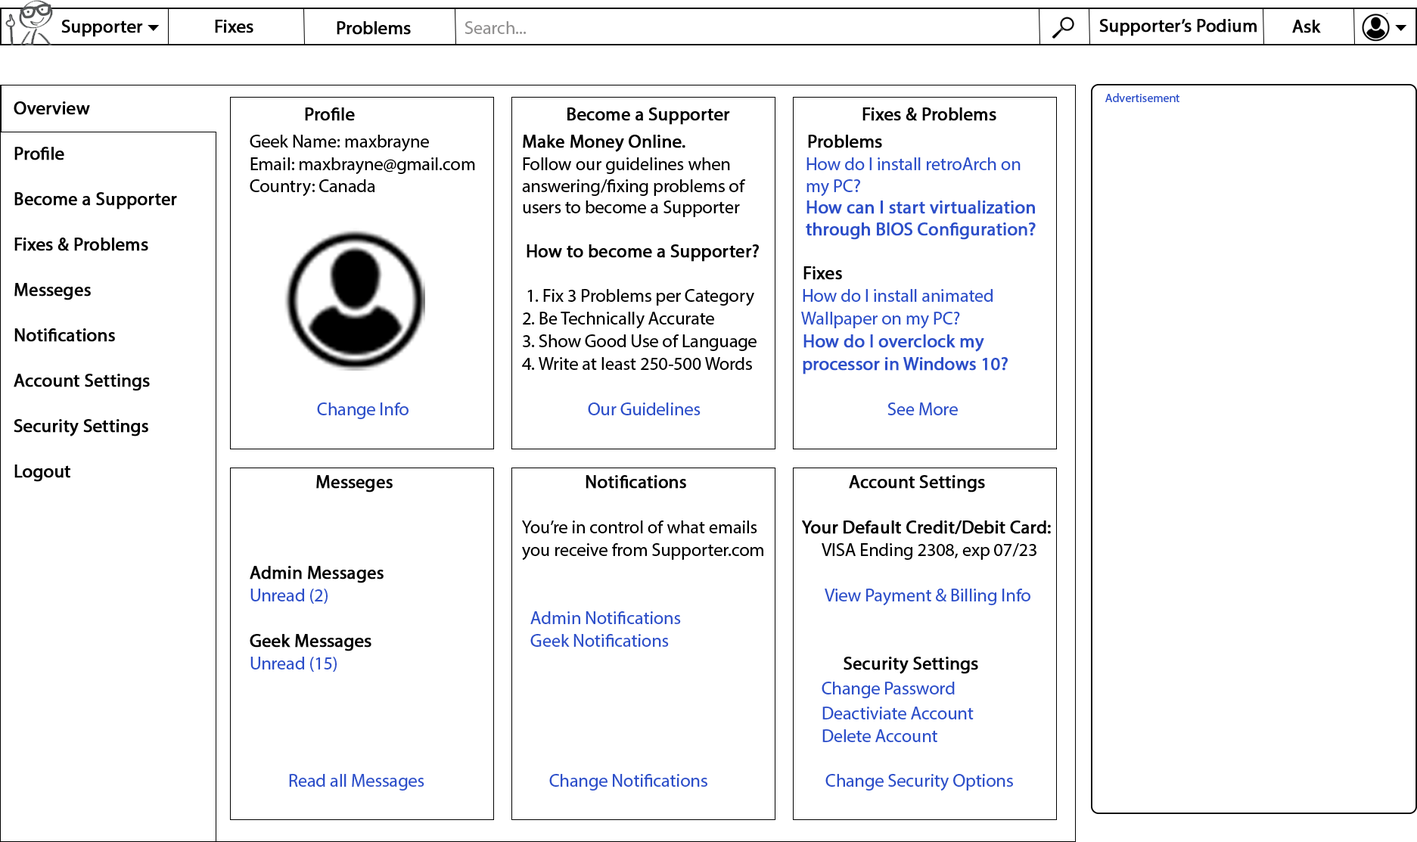
<style>
.page{position:relative;width:1417px;height:842px;background:#ffffff}
.page>*{position:absolute;margin:0}
.t1{font:18.2px "MyriadPro-Regular";color:#000000;font-weight:bold}
.t2{font:18.2px "MyriadPro-Regular";color:#919090}
.t3{font:18.2px "MyriadPro-Regular";color:#010000;font-weight:bold}
.t4{font:18.2px/45.4px "MyriadPro-Regular";color:#000000;font-weight:bold}
.t5{font:12.1px "MyriadPro-Regular";color:#2d4fc9}
.t6{font:18.2px/22.7px "MyriadPro-Regular";color:#2d4fc9}
.t7{font:18.2px/27.2px "MyriadPro-Regular";color:#000000;font-weight:bold}
.t8{font:18.2px/22.7px "MyriadPro-Regular";color:#000000;font-weight:bold}
.t9{font:18.2px/27.2px "MyriadPro-Regular";color:#000000}
.t10{font:18.2px/22.7px "MyriadPro-Regular";color:#000000}
.t11{font:18.2px "MyriadPro-Regular";color:#000000}
.t12{font:18.2px "MyriadPro-Regular";color:#2d4fc9}
.t13{font:18.2px "MyriadPro-Regular";color:#010000}
.t14{font:18.2px "MyriadPro-Regular";color:#2d4fc9;font-weight:bold}
.t15{font:18.2px/22.7px "MyriadPro-Regular";color:#2d4fc9;font-weight:bold}
</style>
<div class="page">
<p class="t1" style="left:61px;top:20px;width:82px;height:17px">Supporter</p>
<p class="t1" style="left:215px;top:20px;width:38px;height:13px">Fixes</p>
<p class="t1" style="left:337px;top:21px;width:74px;height:14px">Problems</p>
<p class="t2" style="left:464px;top:21px;width:62px;height:13px">Search...</p>
<p class="t3" style="left:1099px;top:19px;width:157px;height:17px">Supporter’s Podium</p>
<p class="t1" style="left:1292px;top:20px;width:29px;height:13px">Ask</p>
<p class="t4" style="left:14px;top:101px;width:163px;height:381px">Overview<br>Profile<br>Become a Supporter<br>Fixes &amp; Problems<br>Messeges<br>Notifications<br>Account Settings<br>Security Settings<br>Logout</p>
<p class="t5" style="left:1105px;top:93px;width:74px;height:9px">Advertisement</p>
<p class="t6" style="left:250px;top:107px;width:801px;height:683px"><span class="t7">  Profile       </span><span class="t8">     Become a Supporter    </span><span class="t7">    Fixes &amp; Problems    <br></span><span class="t9">Geek Name: maxbrayne    </span><span class="t1">Make Money Online.        </span><span class="t7">Problems           <br></span><span class="t10">Email: maxbrayne@gma</span><span class="t11">il.com  Follow our guidelines when      </span><span class="t12">How do I install retroArch on    <br></span><span class="t11">Country: Canada      </span><span class="t13">answering/fixing problems of     </span><span class="t12">my PC?           <br>          </span><span class="t11">users to become a Supporter     </span><span class="t14">How can I start virtualization      <br>                         through BIOS Configuration?<br>           </span><span class="t1">How to become a Supporter?             <br>                        Fixes <br>           </span><span class="t10">1. Fix 3 Problems per Category    </span>How do I install animated      <br>          <span class="t10">2. Be Technically Accurate      </span>Wallpaper on my PC?       <br>          <span class="t10">3. Show Good Use of Language</span><span class="t15">    How do I overclock my      <br>          </span><span class="t10">4. Write at least 250-500 Words    </span><span class="t15">processor in Windows 10?     <br>                      <br>     </span>Change Info          Our Guidelines          See More   <br><br><br>     <span class="t7">Messeges             Notifications      Account Settings<br></span><span class="t10"><br>          You’re in control of what emails    </span><span class="t8">Your Default Credit/Debit Card:                      <br>          </span><span class="t10">you receive from Supporter.com         VISA Ending 2308, exp 07/23<br></span><span class="t8">Admin Messages        <br></span>Unread (2)                    <span class="t12">View Payment &amp; Billing Info<br>            </span>Admin Notifications          <br><span class="t8">Geek Messages        </span>Geek Notifications<br>Unread (15)            <span class="t8">           Security Settings  <br>                     </span>Change Password<br>                     Deactiviate Account<br>                     Delete Account<br>                    <br>    <span class="t12">Read all Messages     Change Notifications      Change Security Options</span></p>
</div>
